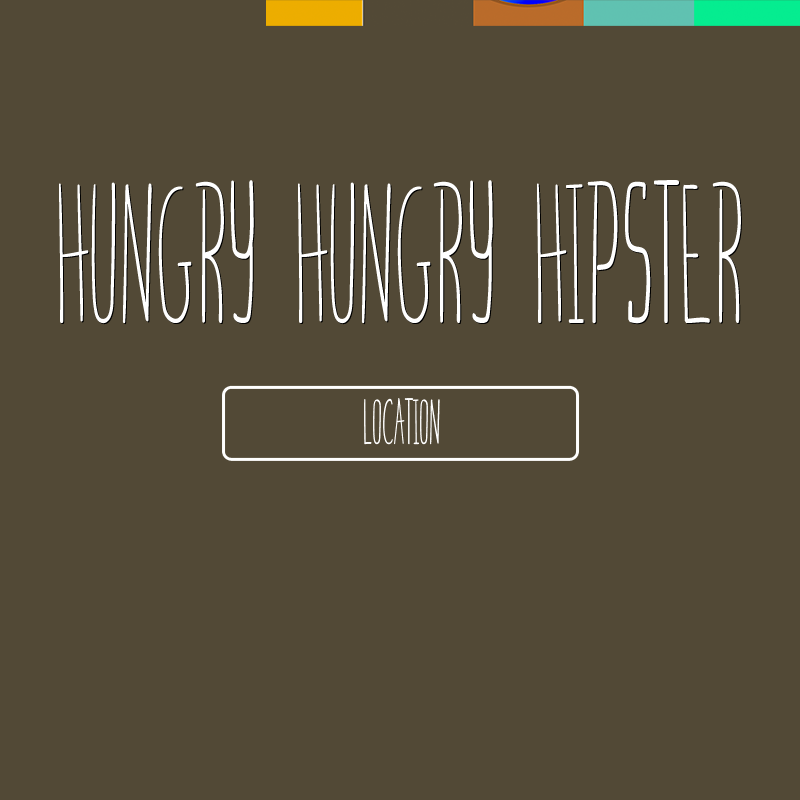
<style>
.page{position:relative;width:800px;height:800px;background:#524936}
.page>*{position:absolute;margin:0}
.t1{font:200px "Skinnybastard-Regular";color:#ffffff}
.t2{font:64px "Skinnybastard-Regular";color:#ffffff}
</style>
<div class="page">
<p class="t1" style="left:59px;top:180px;width:682px;height:144px">hungry hungry hipster</p>
<p class="t2" style="left:364px;top:398px;width:76px;height:47px">location</p>
</div>
